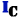
<style>
.page{position:relative;width:19px;height:19px;background:#ffffff}
.page>*{position:absolute;margin:0}
.t1{font:16px "Stencil";letter-spacing:-0.14em;color:#0011b6;font-weight:bold}
.t2{font:15px "Stencil";letter-spacing:-0.14em;color:#000000;font-weight:bold}
</style>
<div class="page">
<p class="t1" style="left:2px;top:1px;width:7px;height:12px">I</p>
<p class="t2" style="left:8px;top:6px;width:10px;height:11px">C</p>
</div>
